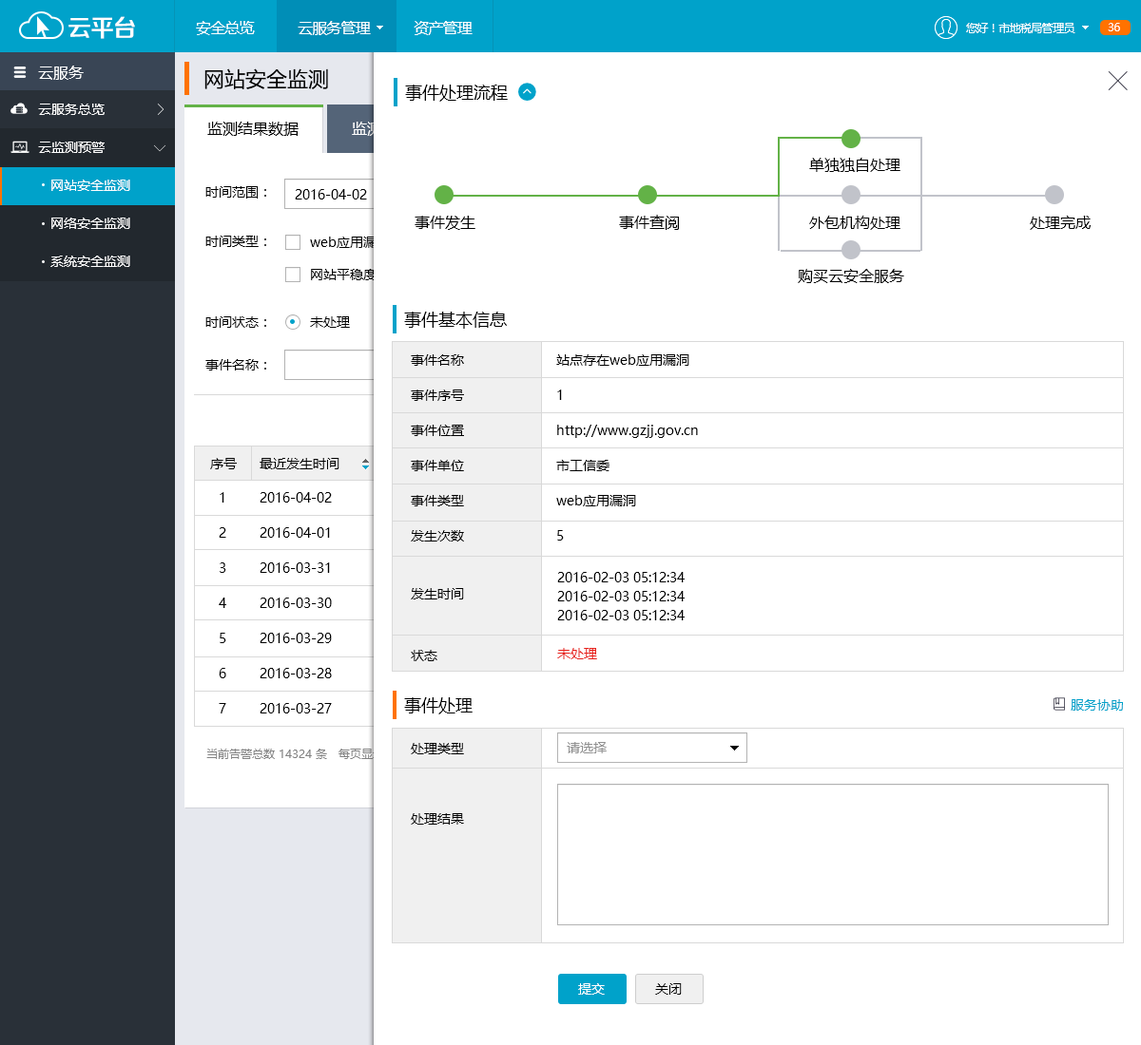
<style>
.page{position:relative;width:1141px;height:1045px;background:#ffffff}
.page>*{position:absolute;margin:0}
.t1{font:24.1px "FZZZHONGJW--GB1-0";letter-spacing:-0.05em;color:#ffffff}
.t2{font:15.2px "MicrosoftYaHei";letter-spacing:-0.05em;color:#ffffff}
.t3{font:11.4px "MicrosoftYaHei";letter-spacing:-0.05em;color:#ffffff}
.t4{font:15.2px "MicrosoftYaHei";color:#ffffff}
.t5{font:20.9px "MicrosoftYaHei";color:#000000}
.t6{font:17.1px "MicrosoftYaHei";color:#000000}
.t7{font:13.3px "MicrosoftYaHei";color:#ffffff}
.t8{font:15.2px "MicrosoftYaHei";color:#000000}
.t9{font:13.3px/38px "MicrosoftYaHei";color:#ffffff}
.t10{font:13.3px "MicrosoftYaHei";color:#000000}
.t11{font:13.3px/35.2px "MicrosoftYaHei";color:#000000}
.t12{font:13.3px/19px "MicrosoftYaHei";color:#000000}
.t13{font:13.3px "MicrosoftYaHei";color:#e71f19}
.t14{font:13.3px "MicrosoftYaHei";color:#00a2ca}
.t15{font:11.4px "MicrosoftYaHei";color:#838383}
.t16{font:13.3px "MicrosoftYaHei";color:#919191}
</style>
<div class="page">
<p class="t1" style="left:68px;top:16px;width:67px;height:23px">云平台</p>
<p class="t2" style="left:196px;top:21px;width:276px;height:14px">安全总览           云服务管理           资产管理</p>
<p class="t3" style="left:966px;top:23px;width:109px;height:10px">您好！市地税局管理员</p>
<p class="t3" style="left:1107px;top:23px;width:13px;height:8px">36</p>
<p class="t4" style="left:38px;top:66px;width:46px;height:14px">云服务</p>
<p class="t5" style="left:204px;top:68px;width:124px;height:21px">网站安全监测</p>
<p class="t6" style="left:405px;top:85px;width:103px;height:17px">事件处理流程</p>
<p class="t7" style="left:38px;top:104px;width:67px;height:11px">云服务总览</p>
<p class="t8" style="left:207px;top:122px;width:91px;height:14px">监测结果数据</p>
<p class="t7" style="left:38px;top:142px;width:67px;height:11px">云监测预警</p>
<p class="t8" style="left:809px;top:158px;width:91px;height:14px">单独独自处理</p>
<p class="t9" style="left:50px;top:180px;width:80px;height:87px">网站安全监测<br>网络安全监测<br>系统安全监测</p>
<p class="t10" style="left:205px;top:186px;width:61px;height:13px">时间范围：</p>
<p class="t10" style="left:295px;top:189px;width:72px;height:11px">2016-04-02</p>
<p class="t8" style="left:414px;top:216px;width:61px;height:14px">事件发生</p>
<p class="t8" style="left:619px;top:215px;width:60px;height:15px">事件查阅</p>
<p class="t8" style="left:809px;top:216px;width:91px;height:14px">外包机构处理</p>
<p class="t8" style="left:1029px;top:216px;width:61px;height:14px">处理完成</p>
<p class="t10" style="left:205px;top:236px;width:61px;height:11px">时间类型：</p>
<p class="t10" style="left:310px;top:237px;width:80px;height:11px">web应用漏洞</p>
<p class="t10" style="left:311px;top:269px;width:65px;height:11px">网站平稳度</p>
<p class="t8" style="left:797px;top:269px;width:107px;height:14px">购买云安全服务</p>
<p class="t10" style="left:205px;top:317px;width:61px;height:11px">时间状态：</p>
<p class="t10" style="left:310px;top:317px;width:40px;height:11px">未处理</p>
<p class="t6" style="left:404px;top:312px;width:103px;height:17px">事件基本信息</p>
<p class="t10" style="left:205px;top:359px;width:61px;height:12px">事件名称：</p>
<p class="t11" style="left:411px;top:355px;width:53px;height:187px">事件名称<br>事件序号<br>事件位置<br>事件单位<br>事件类型<br>发生次数</p>
<p class="t11" style="left:556px;top:355px;width:142px;height:186px">站点存在web应用漏洞<br>1<br>http://www.gzjj.gov.cn<br>市工信委<br>web应用漏洞<br>5</p>
<p class="t11" style="left:219px;top:492px;width:7px;height:222px">1<br>2<br>3<br>4<br>5<br>6<br>7</p>
<p class="t11" style="left:259px;top:492px;width:73px;height:222px">2016-04-02<br>2016-04-01<br>2016-03-31<br>2016-03-30<br>2016-03-29<br>2016-03-28<br>2016-03-27</p>
<p class="t12" style="left:557px;top:572px;width:127px;height:49px">2016-02-03 05:12:34<br>2016-02-03 05:12:34<br>2016-02-03 05:12:34</p>
<p class="t10" style="left:411px;top:588px;width:53px;height:12px">发生时间</p>
<p class="t10" style="left:411px;top:650px;width:26px;height:12px">状态</p>
<p class="t13" style="left:557px;top:648px;width:40px;height:12px">未处理</p>
<p class="t6" style="left:404px;top:698px;width:68px;height:17px">事件处理</p>
<p class="t14" style="left:1070px;top:700px;width:52px;height:11px">服务协助</p>
<p class="t15" style="left:206px;top:749px;width:269px;height:10px">当前告警总数 14324 条   每页显示               条记录</p>
<p class="t11" style="left:411px;top:743px;width:53px;height:82px">处理类型<br><br>处理结果</p>
<p class="t16" style="left:566px;top:742px;width:40px;height:12px">请选择</p>
<p class="t7" style="left:578px;top:984px;width:26px;height:11px">提交</p>
<p class="t10" style="left:655px;top:984px;width:26px;height:11px">关闭</p>
</div>
